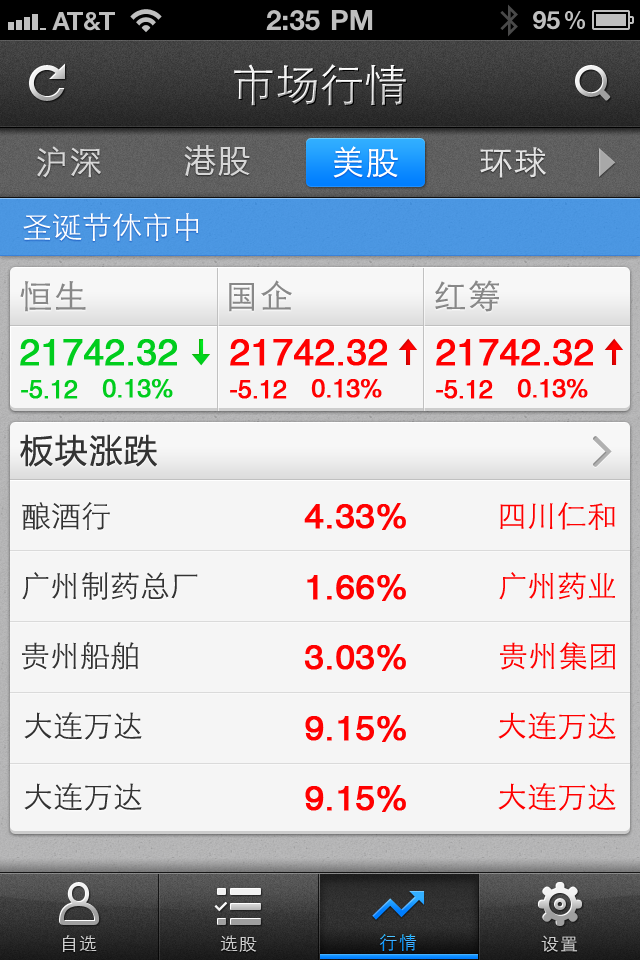
<style>
.page{position:relative;width:640px;height:960px;background:#f5f5f5}
.page>*{position:absolute;margin:0}
.t1{font:44px "STXihei";letter-spacing:0.005em}
.t2{font:33px "STXihei";letter-spacing:0.05em;color:#d6d6d6}
.t3{font:32px "MicrosoftYaHei";letter-spacing:0.05em;color:#d6d6d6}
.t4{font:33px "STXihei";letter-spacing:0.05em;color:#ffffff}
.t5{font:33px "STXihei";letter-spacing:0.05em;color:#e3e3e3}
.t6{font:30px "STXihei";color:#ffffff}
.t7{font:33px "STXihei";letter-spacing:0.05em;color:#888888}
.t8{font:37px "HelveticaCE-Regular";letter-spacing:-0.01em;color:#00cd1d;font-weight:bold}
.t9{font:37px "HelveticaCE-Regular";letter-spacing:-0.01em;color:#ff0000;font-weight:bold}
.t10{font:25px "HelveticaCE-Regular";letter-spacing:-0.025em;color:#00cd1d;font-weight:bold}
.t11{font:25px "HelveticaCE-Regular";letter-spacing:-0.025em;color:#ff0000;font-weight:bold}
.t12{font:33px "MicrosoftYaHei";letter-spacing:0.05em;color:#333333}
.t13{font:30px "STXihei";color:#333333}
.t14{font:35px "HelveticaCE-Regular";color:#ff0000;font-weight:bold}
.t15{font:30px "STXihei";color:#ff0000}
.t16{font:18px "STXihei";letter-spacing:0.05em;color:#cccccc}
.t17{font:18px "STXihei";letter-spacing:0.1em}
</style>
<div class="page">
<p class="t1" style="left:234px;top:64px;width:172px;height:42px">市场行情</p>
<p class="t2" style="left:37px;top:146px;width:64px;height:32px">沪深</p>
<p class="t2" style="left:37px;top:146px;width:64px;height:32px">沪深</p>
<p class="t3" style="left:184px;top:145px;width:66px;height:31px">港股</p>
<p class="t3" style="left:184px;top:145px;width:66px;height:31px">港股</p>
<p class="t4" style="left:333px;top:146px;width:65px;height:32px">美股</p>
<p class="t4" style="left:333px;top:146px;width:65px;height:32px">美股</p>
<p class="t5" style="left:480px;top:147px;width:66px;height:31px">环球</p>
<p class="t5" style="left:480px;top:147px;width:66px;height:31px">环球</p>
<p class="t6" style="left:23px;top:213px;width:176px;height:28px">圣诞节休市中</p>
<p class="t7" style="left:20px;top:281px;width:66px;height:31px">恒生</p>
<p class="t7" style="left:229px;top:280px;width:63px;height:32px">国企</p>
<p class="t7" style="left:435px;top:280px;width:64px;height:32px">红筹</p>
<p class="t8" style="left:20px;top:339px;width:157px;height:27px">21742.32</p>
<p class="t9" style="left:230px;top:339px;width:157px;height:27px">21742.32</p>
<p class="t9" style="left:436px;top:339px;width:157px;height:27px">21742.32</p>
<p class="t10" style="left:21px;top:380px;width:57px;height:19px">-5.12</p>
<p class="t10" style="left:102px;top:379px;width:71px;height:20px">0.13%</p>
<p class="t11" style="left:230px;top:380px;width:57px;height:19px">-5.12</p>
<p class="t11" style="left:311px;top:379px;width:71px;height:20px">0.13%</p>
<p class="t11" style="left:436px;top:380px;width:57px;height:19px">-5.12</p>
<p class="t11" style="left:517px;top:379px;width:71px;height:20px">0.13%</p>
<p class="t12" style="left:20px;top:434px;width:137px;height:33px">板块涨跌</p>
<p class="t13" style="left:22px;top:502px;width:88px;height:28px">酿酒行</p>
<p class="t14" style="left:304px;top:503px;width:102px;height:27px">4.33%</p>
<p class="t15" style="left:500px;top:502px;width:115px;height:28px">四川仁和</p>
<p class="t13" style="left:22px;top:572px;width:176px;height:28px">广州制药总厂</p>
<p class="t14" style="left:307px;top:574px;width:99px;height:27px">1.66%</p>
<p class="t15" style="left:499px;top:572px;width:116px;height:28px">广州药业</p>
<p class="t13" style="left:22px;top:641px;width:116px;height:29px">贵州船舶</p>
<p class="t14" style="left:304px;top:644px;width:102px;height:27px">3.03%</p>
<p class="t15" style="left:500px;top:642px;width:115px;height:28px">贵州集团</p>
<p class="t13" style="left:24px;top:712px;width:118px;height:28px">大连万达</p>
<p class="t15" style="left:498px;top:712px;width:118px;height:28px">大连万达</p>
<p class="t14" style="left:305px;top:715px;width:101px;height:27px">9.15%</p>
<p class="t13" style="left:24px;top:783px;width:118px;height:28px">大连万达</p>
<p class="t14" style="left:305px;top:785px;width:101px;height:27px">9.15%</p>
<p class="t15" style="left:498px;top:783px;width:118px;height:28px">大连万达</p>
<p class="t16" style="left:62px;top:935px;width:35px;height:17px">自选</p>
<p class="t16" style="left:220px;top:935px;width:37px;height:17px">选股</p>
<p class="t17" style="left:379px;top:934px;width:38px;height:17px">行情</p>
<p class="t16" style="left:541px;top:935px;width:37px;height:17px">设置</p>
</div>
